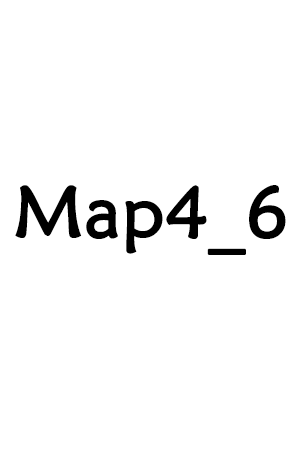
<style>
.page{position:relative;width:300px;height:450px;background:#ffffff}
.page>*{position:absolute;margin:0}
.t1{font:72px "STXinwei";color:#000000;font-weight:bold}
</style>
<div class="page">
<p class="t1" style="left:15px;top:185px;width:271px;height:70px">Map4_6</p>
</div>
